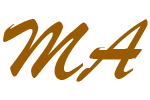
<style>
.page{position:relative;width:150px;height:100px;background:#ffffff}
.page>*{position:absolute;margin:0}
.t1{font:90px "BrushScriptMT";color:#995a00}
</style>
<div class="page">
<p class="t1" style="left:3px;top:19px;width:145px;height:63px">MA</p>
</div>
